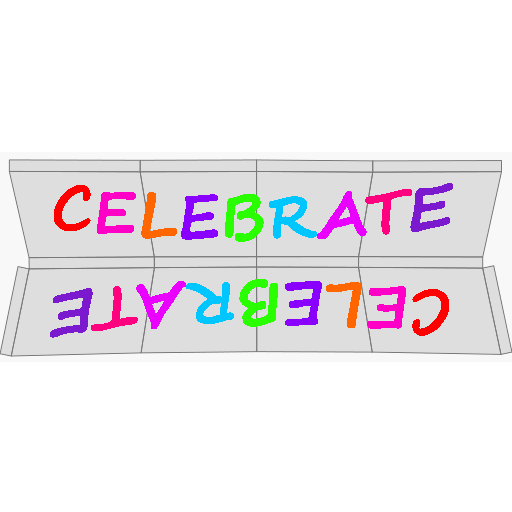
<style>
.page{position:relative;width:512px;height:512px;background:#ffffff}
.page>*{position:absolute;margin:0}
.t1{font:60px "SegoeScript-Bold";color:#ff0000}
.t2{font:60px "SegoeScript-Bold";color:#ff00c6}
.t3{font:60px "SegoeScript-Bold";color:#ff6600}
.t4{font:60px "SegoeScript-Bold";color:#8a00ff}
.t5{font:60px "SegoeScript-Bold";color:#2aff00}
.t6{font:60px "SegoeScript-Bold";color:#00c6ff}
.t7{font:60px "SegoeScript-Bold";color:#ea00ff}
.t8{font:60px "SegoeScript-Bold";color:#ff007e}
.t9{font:60px "SegoeScript-Bold";color:#7a19cd}
</style>
<div class="page">
<p class="t1" style="left:54px;top:183px;width:399px;height:59px">C<span class="t2">E</span><span class="t3">L</span><span class="t4">E</span><span class="t5">B</span><span class="t6">R</span><span class="t7">A</span><span class="t8">T</span><span class="t9">E</span></p>
<p class="t1" style="left:50px;top:279px;width:399px;height:59px;rotate:180deg">C<span class="t2">E</span><span class="t3">L</span><span class="t4">E</span><span class="t5">B</span><span class="t6">R</span><span class="t7">A</span><span class="t8">T</span><span class="t9">E</span></p>
</div>
